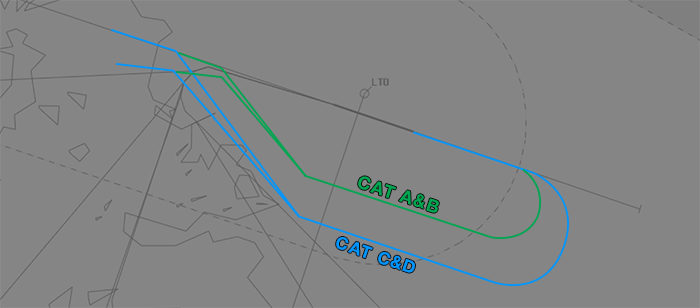
<style>
.page{position:relative;width:700px;height:308px;background:#858585}
.page>*{position:absolute;margin:0}
.t1{font:17.8px "HelveticaNeue-Bold";letter-spacing:0.075em;color:#00a651}
.t2{font:17.2px "HelveticaNeue-Bold";letter-spacing:0.075em;color:#0096ff}
</style>
<div class="page">
<p class="t1" style="left:358px;top:176px;width:81px;height:37px;rotate:18deg">CAT A&amp;B</p>
<p class="t2" style="left:336px;top:237px;width:79px;height:36px;rotate:19deg">CAT C&amp;D</p>
</div>
